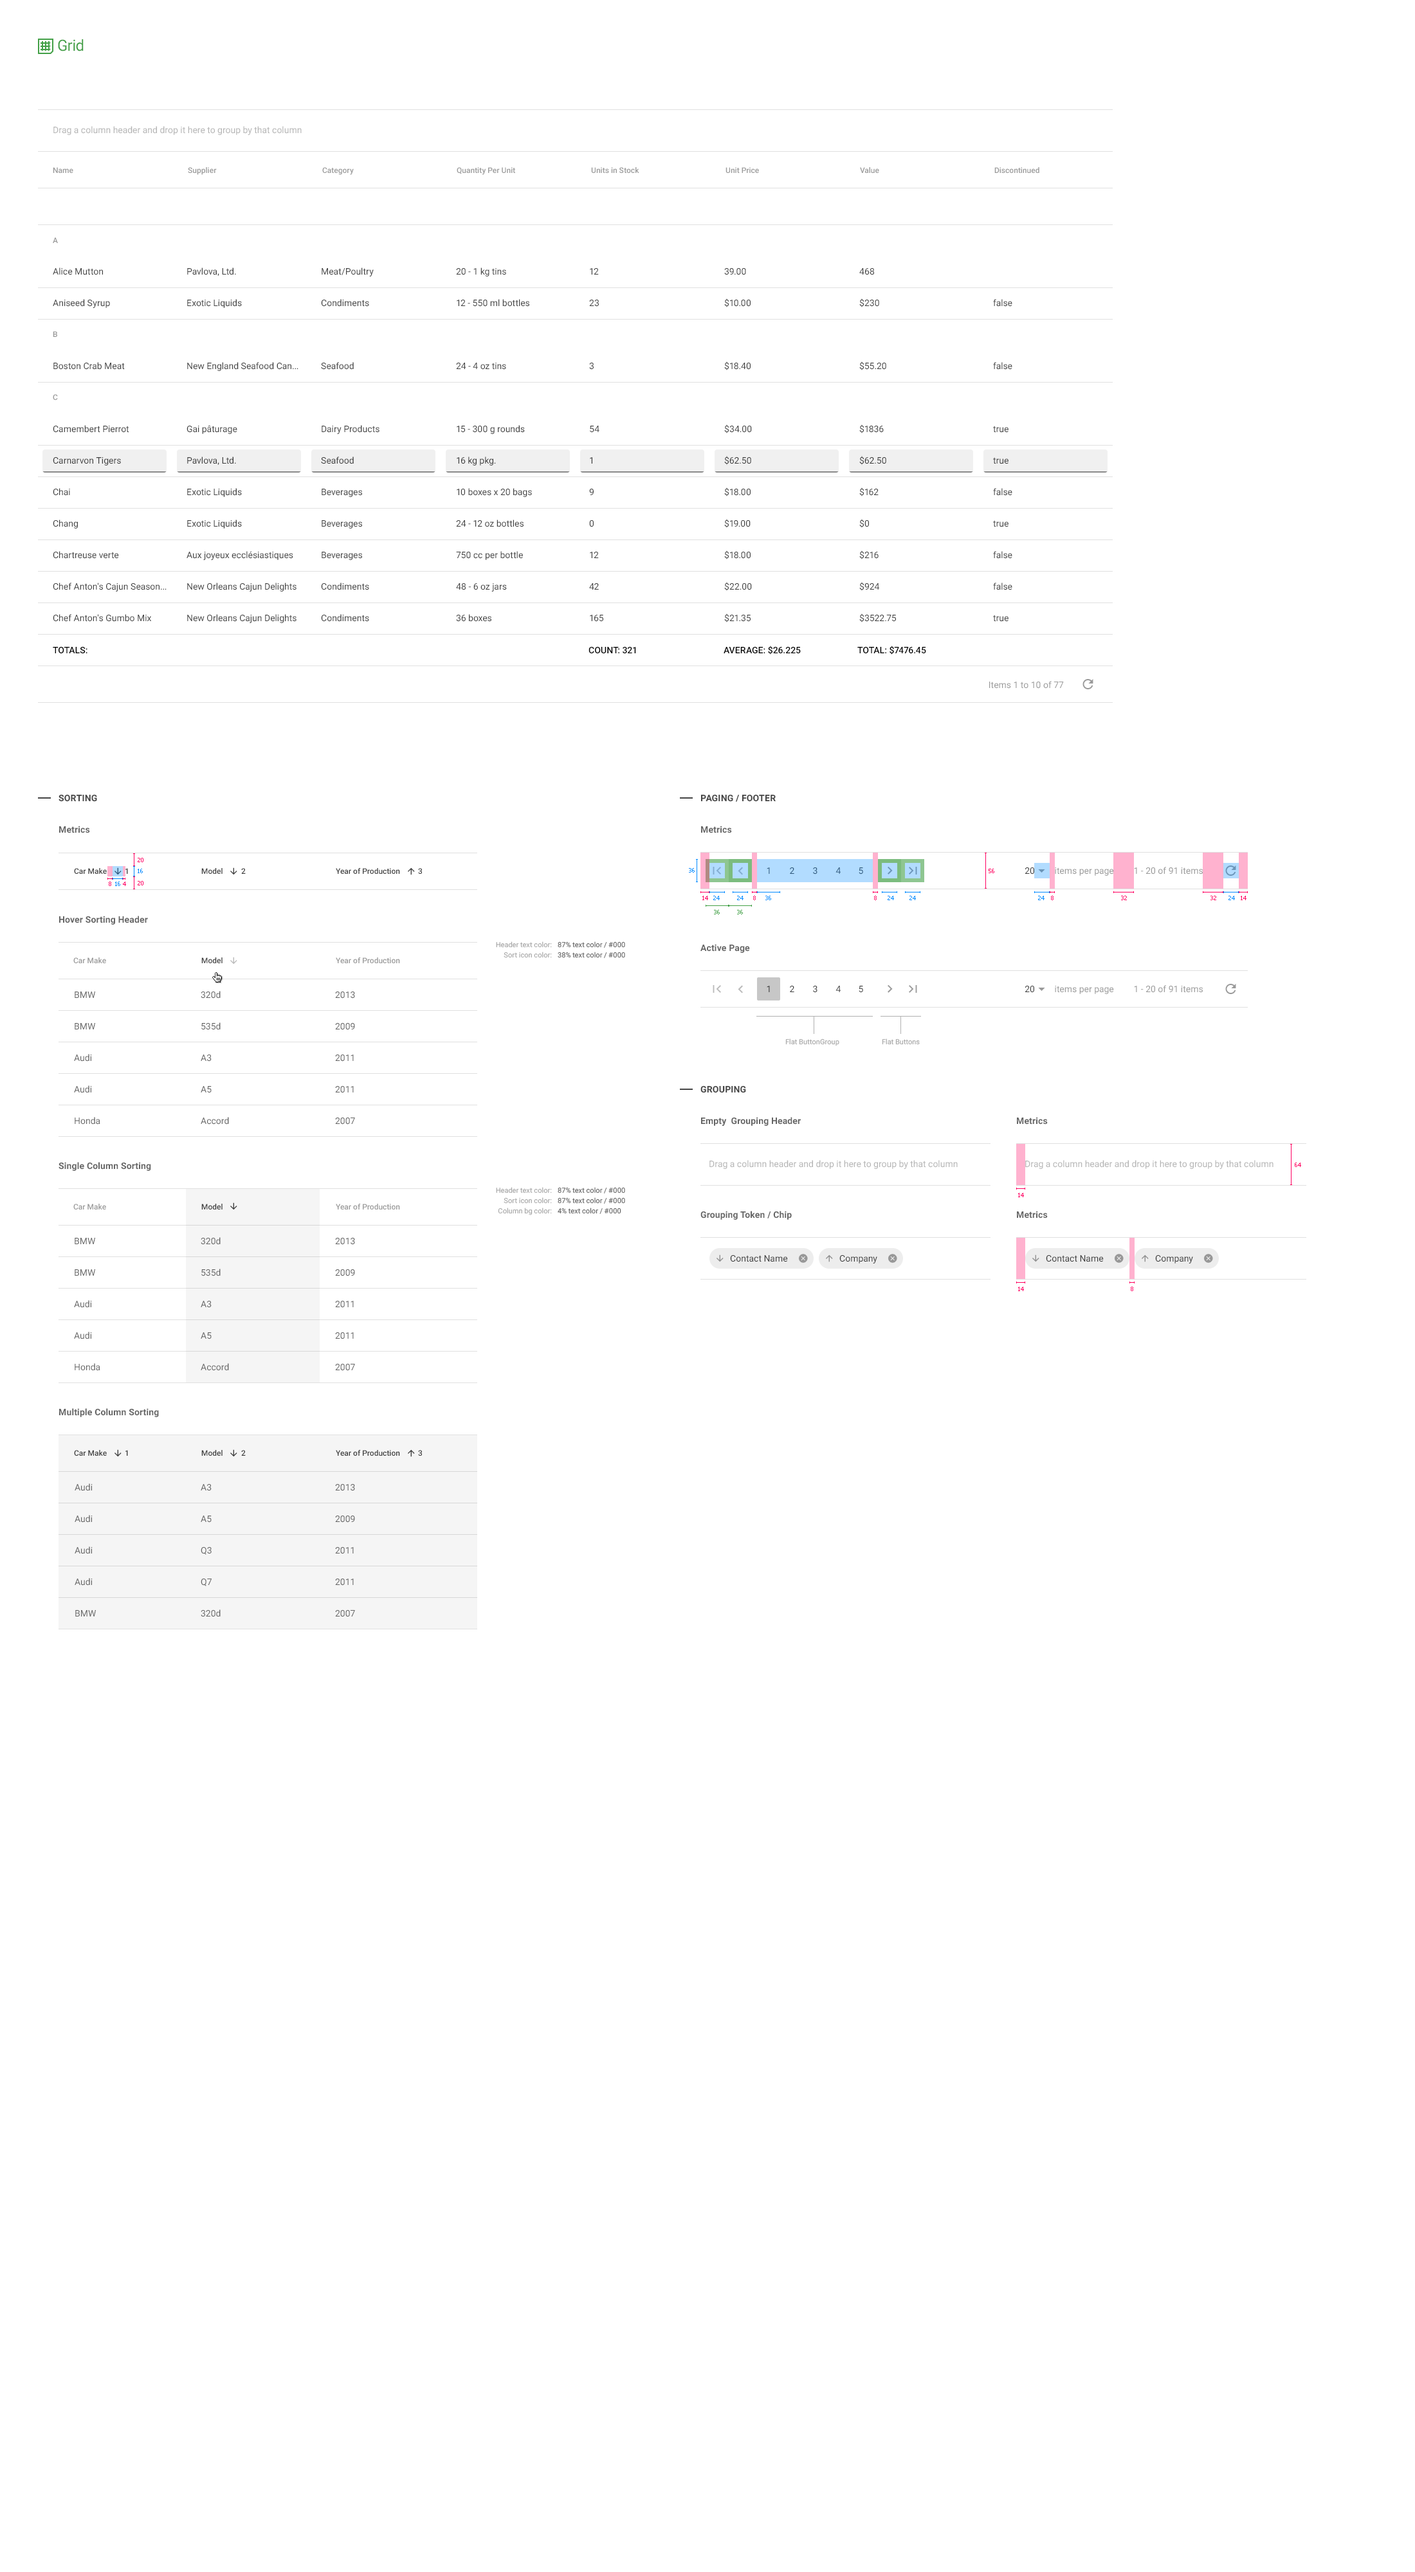
<style>
.page{position:relative;width:1415px;height:2572px;background:#ffffff}
.page>*{position:absolute;margin:0}
.t1{font:15.4px "Roboto-Regular";letter-spacing:-0.025em;color:#43a047}
.t2{font:9px "Roboto-Regular";color:#b4b4b4}
.t3{font:7.7px "Roboto-Medium";color:#9a9a9a}
.t4{font:9px/31.5px "Roboto-Regular";color:#404040}
.t5{font:9px "Roboto-Medium";color:#000000}
.t6{font:9px "Roboto-Medium";color:#000000;text-transform:uppercase}
.t7{font:9px "Roboto-Regular";color:#9a9a9a}
.t8{font:9px "Roboto-Bold";letter-spacing:0.01em;color:#454545;text-transform:uppercase}
.t9{font:9px "Roboto-Bold";letter-spacing:0.01em;color:#656565}
.t10{font:5.8px "Tahoma";color:#ff0061}
.t11{font:7.7px "Roboto-Medium";color:#404040}
.t12{font:5.8px "Tahoma";color:#008aff}
.t13{font:9px "Roboto-Regular"}
.t14{font:9px "Roboto-Regular";color:#2d567a}
.t15{font:5.8px "Tahoma";color:#ff0060}
.t16{font:9px "Roboto-Regular";color:#404040}
.t17{font:5.8px "Tahoma";color:#43a047}
.t18{font:7.1px/10.3px "Roboto-Regular";color:#a7a7a7}
.t19{font:7.1px/10.3px "Roboto-Regular";color:#5f5f5f}
.t20{font:9px/31.5px "Roboto-Regular";color:#656565}
.t21{font:7.1px "Roboto-Regular";color:#a7a7a7}
.t22{font:7.7px "Roboto-Medium";color:#3d3d3d}
.t23{font:9px "Roboto-Regular";color:#3b3b3b}
</style>
<div class="page">
<p class="t1" style="left:58px;top:39px;width:26px;height:12px">Grid</p>
<p class="t2" style="left:53px;top:126px;width:249px;height:9px">Drag a column header and drop it here to group by that column</p>
<p class="t3" style="left:53px;top:167px;width:20px;height:6px">Name</p>
<p class="t3" style="left:188px;top:167px;width:29px;height:8px">Supplier</p>
<p class="t3" style="left:322px;top:167px;width:32px;height:8px">Category</p>
<p class="t3" style="left:457px;top:167px;width:58px;height:8px">Quantity Per Unit</p>
<p class="t3" style="left:591px;top:167px;width:48px;height:6px">Units in Stock</p>
<p class="t3" style="left:725px;top:167px;width:34px;height:6px">Unit Price</p>
<p class="t3" style="left:860px;top:167px;width:19px;height:6px">Value</p>
<p class="t3" style="left:994px;top:167px;width:45px;height:6px">Discontinued</p>
<p class="t3" style="left:53px;top:237px;width:5px;height:6px">A</p>
<p class="t4" style="left:53px;top:267px;width:114px;height:355px">Alice Mutton<br>Aniseed Syrup<br><br>Boston Crab Meat<br><br>Camembert Pierrot<br>Carnarvon Tigers<br>Chai<br>Chang<br>Chartreuse verte<br>Chef Anton's Cajun Season...<br>Chef Anton's Gumbo Mix</p>
<p class="t4" style="left:186px;top:267px;width:112px;height:356px">Pavlova, Ltd.<br>Exotic Liquids<br><br>New England Seafood Can...<br><br>Gai pâturage<br>Pavlova, Ltd.<br>Exotic Liquids<br>Exotic Liquids<br>Aux joyeux ecclésiastiques<br>New Orleans Cajun Delights<br>New Orleans Cajun Delights</p>
<p class="t4" style="left:321px;top:267px;width:58px;height:355px">Meat/Poultry<br>Condiments<br><br>Seafood<br><br>Dairy Products<br>Seafood<br>Beverages<br>Beverages<br>Beverages<br>Condiments<br>Condiments</p>
<p class="t4" style="left:456px;top:267px;width:76px;height:355px">20 - 1 kg tins<br>12 - 550 ml bottles<br><br>24 - 4 oz tins<br><br>15 - 300 g rounds<br>16 kg pkg.<br>10 boxes x 20 bags<br>24 - 12 oz bottles<br>750 cc per bottle<br>48 - 6 oz jars<br>36 boxes</p>
<p class="t4" style="left:589px;top:268px;width:14px;height:354px">12<br>23<br><br>3<br><br>54<br>1<br>9<br>0<br>12<br>42<br>165</p>
<p class="t4" style="left:724px;top:268px;width:28px;height:354px">39.00<br>$10.00<br><br>$18.40<br><br>$34.00<br>$62.50<br>$18.00<br>$19.00<br>$18.00<br>$22.00<br>$21.35</p>
<p class="t4" style="left:859px;top:268px;width:37px;height:354px">468<br>$230<br><br>$55.20<br><br>$1836<br>$62.50<br>$162<br>$0<br>$216<br>$924<br>$3522.75</p>
<p class="t4" style="left:993px;top:299px;width:19px;height:323px">false<br><br>false<br><br>true<br>true<br>false<br>true<br>false<br>false<br>true</p>
<p class="t3" style="left:53px;top:331px;width:4px;height:6px">B</p>
<p class="t3" style="left:53px;top:394px;width:5px;height:6px">C</p>
<p class="t5" style="left:53px;top:647px;width:34px;height:7px">TOTALS:</p>
<p class="t6" style="left:588px;top:647px;width:48px;height:7px">Count: 321</p>
<p class="t6" style="left:723px;top:646px;width:78px;height:9px">Average: $26.225</p>
<p class="t6" style="left:857px;top:646px;width:69px;height:9px">Total: $7476.45</p>
<p class="t7" style="left:989px;top:681px;width:74px;height:8px">Items 1 to 10 of 77</p>
<p class="t8" style="left:59px;top:794px;width:38px;height:8px">Sorting</p>
<p class="t8" style="left:700px;top:794px;width:75px;height:8px">Paging / Footer</p>
<p class="t9" style="left:59px;top:826px;width:31px;height:7px">Metrics</p>
<p class="t9" style="left:701px;top:826px;width:31px;height:7px">Metrics</p>
<p class="t10" style="left:138px;top:858px;width:5px;height:4px">20</p>
<p class="t11" style="left:74px;top:868px;width:33px;height:6px">Car Make</p>
<p class="t11" style="left:125px;top:868px;width:3px;height:6px">1</p>
<p class="t12" style="left:138px;top:869px;width:5px;height:4px">16</p>
<p class="t11" style="left:201px;top:868px;width:21px;height:6px">Model</p>
<p class="t11" style="left:241px;top:868px;width:5px;height:6px">2</p>
<p class="t11" style="left:336px;top:868px;width:64px;height:6px">Year of Production</p>
<p class="t11" style="left:418px;top:868px;width:4px;height:6px">3</p>
<p class="t12" style="left:689px;top:868px;width:5px;height:5px">36</p>
<p class="t13" style="left:766px;top:867px;width:4px;height:7px">1</p>
<p class="t14" style="left:790px;top:867px;width:4px;height:7px">2</p>
<p class="t14" style="left:813px;top:867px;width:4px;height:7px">3</p>
<p class="t13" style="left:835px;top:867px;width:5px;height:7px">4</p>
<p class="t14" style="left:858px;top:867px;width:5px;height:7px">5</p>
<p class="t15" style="left:988px;top:869px;width:6px;height:4px">56</p>
<p class="t16" style="left:1025px;top:867px;width:9px;height:7px">20</p>
<p class="t7" style="left:1054px;top:867px;width:60px;height:9px">items per page</p>
<p class="t7" style="left:1134px;top:867px;width:68px;height:7px">1 - 20 of 91 items</p>
<p class="t10" style="left:109px;top:882px;width:2px;height:4px">8</p>
<p class="t12" style="left:115px;top:882px;width:5px;height:4px">16</p>
<p class="t10" style="left:123px;top:882px;width:3px;height:4px">4</p>
<p class="t10" style="left:138px;top:881px;width:5px;height:4px">20</p>
<p class="t10" style="left:702px;top:896px;width:6px;height:4px">14</p>
<p class="t12" style="left:713px;top:896px;width:6px;height:4px">24</p>
<p class="t12" style="left:737px;top:896px;width:6px;height:4px">24</p>
<p class="t10" style="left:753px;top:896px;width:3px;height:4px">8</p>
<p class="t12" style="left:765px;top:896px;width:6px;height:4px">36</p>
<p class="t10" style="left:874px;top:896px;width:2px;height:4px">8</p>
<p class="t12" style="left:887px;top:896px;width:7px;height:4px">24</p>
<p class="t12" style="left:909px;top:896px;width:7px;height:4px">24</p>
<p class="t12" style="left:1038px;top:896px;width:6px;height:4px">24</p>
<p class="t10" style="left:1051px;top:896px;width:2px;height:4px">8</p>
<p class="t10" style="left:1121px;top:896px;width:6px;height:4px">32</p>
<p class="t10" style="left:1210px;top:896px;width:6px;height:4px">32</p>
<p class="t12" style="left:1228px;top:896px;width:7px;height:4px">24</p>
<p class="t10" style="left:1240px;top:896px;width:6px;height:4px">14</p>
<p class="t9" style="left:59px;top:916px;width:89px;height:9px">Hover Sorting Header</p>
<p class="t17" style="left:714px;top:910px;width:5px;height:4px">36</p>
<p class="t17" style="left:737px;top:910px;width:6px;height:4px">36</p>
<p class="t18" style="left:496px;top:941px;width:56px;height:17px;text-align:right">Header text color:<br>Sort icon color:</p>
<p class="t19" style="left:557px;top:941px;width:68px;height:17px">87% text color / #000<br>38% text color / #000</p>
<p class="t9" style="left:700px;top:944px;width:50px;height:9px">Active Page</p>
<p class="t3" style="left:73px;top:957px;width:33px;height:6px">Car Make</p>
<p class="t11" style="left:201px;top:957px;width:21px;height:6px">Model</p>
<p class="t3" style="left:336px;top:957px;width:64px;height:6px">Year of Production</p>
<p class="t13" style="left:766px;top:986px;width:4px;height:6px">1</p>
<p class="t16" style="left:790px;top:986px;width:4px;height:6px">2</p>
<p class="t16" style="left:813px;top:986px;width:4px;height:7px">3</p>
<p class="t13" style="left:835px;top:986px;width:5px;height:6px">4</p>
<p class="t16" style="left:858px;top:986px;width:5px;height:7px">5</p>
<p class="t16" style="left:1025px;top:986px;width:9px;height:7px">20</p>
<p class="t7" style="left:1054px;top:986px;width:60px;height:8px">items per page</p>
<p class="t7" style="left:1134px;top:985px;width:68px;height:8px">1 - 20 of 91 items</p>
<p class="t20" style="left:74px;top:991px;width:26px;height:134px">BMW<br>BMW<br>Audi<br>Audi<br>Honda</p>
<p class="t20" style="left:201px;top:991px;width:28px;height:134px">320d<br>535d<br>A3<br>A5<br>Accord</p>
<p class="t20" style="left:335px;top:991px;width:20px;height:134px">2013<br>2009<br>2011<br>2011<br>2007</p>
<p class="t21" style="left:785px;top:1038px;width:54px;height:8px">Flat ButtonGroup</p>
<p class="t21" style="left:882px;top:1038px;width:37px;height:7px">Flat Buttons</p>
<p class="t8" style="left:700px;top:1085px;width:46px;height:8px">Grouping</p>
<p class="t9" style="left:701px;top:1117px;width:100px;height:9px">Empty  Grouping Header</p>
<p class="t9" style="left:1017px;top:1117px;width:30px;height:8px">Metrics</p>
<p class="t9" style="left:59px;top:1162px;width:92px;height:9px">Single Column Sorting</p>
<p class="t2" style="left:709px;top:1160px;width:248px;height:9px">Drag a column header and drop it here to group by that column</p>
<p class="t2" style="left:1025px;top:1160px;width:248px;height:9px">Drag a column header and drop it here to group by that column</p>
<p class="t15" style="left:1294px;top:1163px;width:7px;height:4px">64</p>
<p class="t18" style="left:496px;top:1187px;width:56px;height:28px;text-align:right">Header text color:<br>Sort icon color:<br>Column bg color:</p>
<p class="t19" style="left:557px;top:1187px;width:68px;height:27px">87% text color / #000<br>87% text color / #000<br>4% text color / #000</p>
<p class="t10" style="left:1018px;top:1193px;width:6px;height:4px">14</p>
<p class="t3" style="left:73px;top:1204px;width:33px;height:5px">Car Make</p>
<p class="t22" style="left:201px;top:1204px;width:21px;height:5px">Model</p>
<p class="t3" style="left:336px;top:1204px;width:64px;height:5px">Year of Production</p>
<p class="t9" style="left:700px;top:1211px;width:92px;height:9px">Grouping Token / Chip</p>
<p class="t9" style="left:1017px;top:1211px;width:30px;height:7px">Metrics</p>
<p class="t20" style="left:74px;top:1238px;width:26px;height:133px">BMW<br>BMW<br>Audi<br>Audi<br>Honda</p>
<p class="t20" style="left:201px;top:1237px;width:28px;height:134px">320d<br>535d<br>A3<br>A5<br>Accord</p>
<p class="t20" style="left:335px;top:1238px;width:20px;height:133px">2013<br>2009<br>2011<br>2011<br>2007</p>
<p class="t23" style="left:730px;top:1255px;width:58px;height:7px">Contact Name</p>
<p class="t23" style="left:839px;top:1255px;width:38px;height:8px">Company</p>
<p class="t23" style="left:1045px;top:1255px;width:58px;height:7px">Contact Name</p>
<p class="t23" style="left:1155px;top:1255px;width:38px;height:8px">Company</p>
<p class="t10" style="left:1018px;top:1287px;width:6px;height:4px">14</p>
<p class="t10" style="left:1130px;top:1287px;width:3px;height:4px">8</p>
<p class="t9" style="left:59px;top:1408px;width:100px;height:9px">Multiple Column Sorting</p>
<p class="t22" style="left:74px;top:1450px;width:33px;height:6px">Car Make</p>
<p class="t22" style="left:125px;top:1450px;width:3px;height:6px">1</p>
<p class="t22" style="left:201px;top:1450px;width:21px;height:6px">Model</p>
<p class="t22" style="left:241px;top:1450px;width:5px;height:6px">2</p>
<p class="t22" style="left:336px;top:1450px;width:64px;height:6px">Year of Production</p>
<p class="t22" style="left:418px;top:1450px;width:4px;height:6px">3</p>
<p class="t20" style="left:75px;top:1483px;width:21px;height:133px">Audi<br>Audi<br>Audi<br>Audi<br>BMW</p>
<p class="t20" style="left:201px;top:1484px;width:20px;height:133px">A3<br>A5<br>Q3<br>Q7<br>320d</p>
<p class="t20" style="left:335px;top:1484px;width:20px;height:133px">2013<br>2009<br>2011<br>2011<br>2007</p>
</div>
